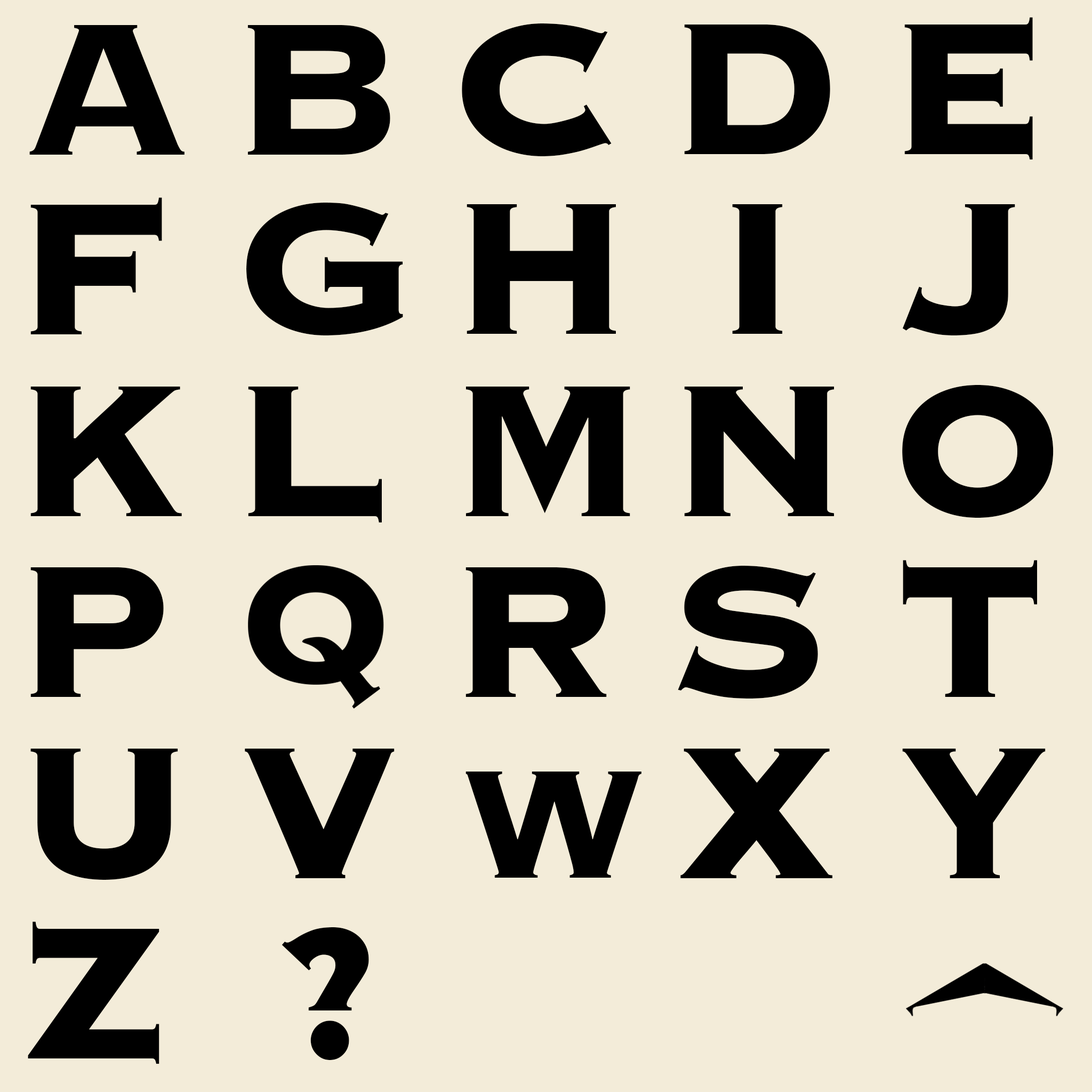
<style>
.page{position:relative;width:1092px;height:1092px;background:#f3ecd9}
.page>*{position:absolute;margin:0}
.t1{font:244.1px "CopperplateBlackCondensedSSiBlackCondensed";color:#000000}
.t2{font:199.9px "CopperplateBlackCondensedSSiBlackCondensed";color:#000000}
</style>
<div class="page">
<p class="t1" style="left:904px;top:17px;width:129px;height:143px">E</p>
<p class="t1" style="left:29px;top:25px;width:155px;height:130px">A</p>
<p class="t1" style="left:247px;top:25px;width:143px;height:130px">B</p>
<p class="t1" style="left:462px;top:23px;width:150px;height:133px">C</p>
<p class="t1" style="left:684px;top:25px;width:146px;height:129px">D</p>
<p class="t1" style="left:30px;top:197px;width:132px;height:137px">F</p>
<p class="t1" style="left:246px;top:203px;width:157px;height:132px">G</p>
<p class="t1" style="left:467px;top:204px;width:149px;height:130px">H</p>
<p class="t1" style="left:732px;top:204px;width:51px;height:130px">I</p>
<p class="t1" style="left:902px;top:204px;width:113px;height:131px">J</p>
<p class="t1" style="left:30px;top:387px;width:152px;height:129px">K</p>
<p class="t1" style="left:248px;top:387px;width:134px;height:136px">L</p>
<p class="t1" style="left:465px;top:387px;width:165px;height:129px">M</p>
<p class="t1" style="left:684px;top:387px;width:150px;height:129px">N</p>
<p class="t1" style="left:902px;top:385px;width:152px;height:133px">O</p>
<p class="t1" style="left:30px;top:567px;width:134px;height:130px">P</p>
<p class="t1" style="left:465px;top:567px;width:142px;height:130px">R</p>
<p class="t1" style="left:678px;top:566px;width:140px;height:132px">S</p>
<p class="t1" style="left:903px;top:560px;width:134px;height:137px">T</p>
<p class="t1" style="left:30px;top:749px;width:148px;height:131px">U</p>
<p class="t1" style="left:245px;top:749px;width:150px;height:129px">V</p>
<p class="t1" style="left:680px;top:749px;width:153px;height:129px">X</p>
<p class="t1" style="left:902px;top:749px;width:144px;height:129px">Y</p>
<p class="t2" style="left:465px;top:772px;width:176px;height:106px">W</p>
<p class="t1" style="left:28px;top:921px;width:131px;height:143px">Z</p>
<p class="t1" style="left:282px;top:927px;width:87px;height:133px">?</p>
</div>
